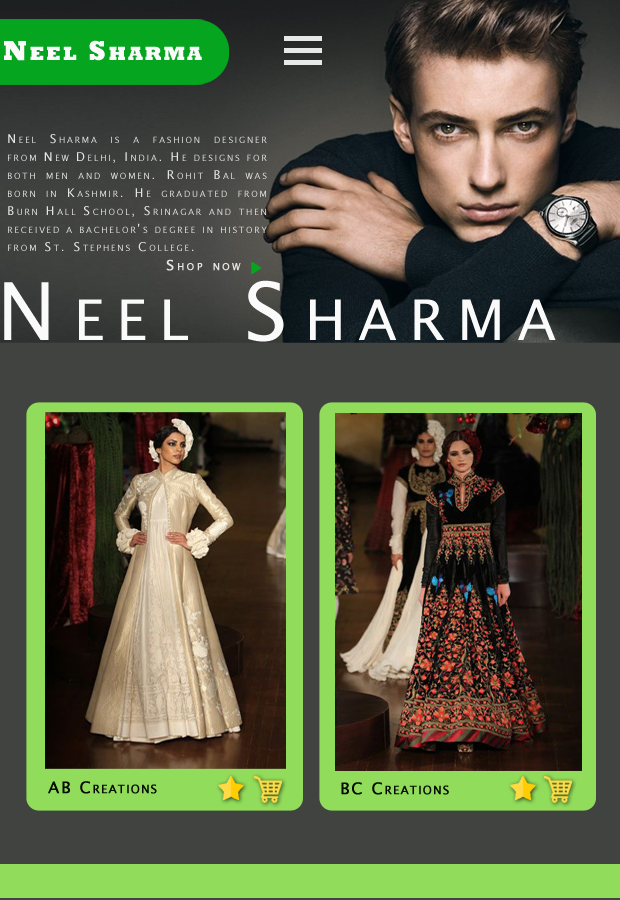
<style>
.page{position:relative;width:620px;height:900px}
.page>*{position:absolute;margin:0}
.t1{font:28px "Rockwell-ExtraBold";letter-spacing:0.1em;color:#fafafa;font-variant:small-caps}
.t2{font:12px/18px "LucidaSans";letter-spacing:0.22em;color:#e5e5e5;font-variant:small-caps}
.t3{font:14px "LucidaSans";letter-spacing:0.22em;color:#e5e5e5;font-variant:small-caps;font-weight:bold}
.t4{font:80px "LucidaSans";letter-spacing:0.22em;color:#fafafa;font-variant:small-caps}
.t5{font:16px "LucidaSans";letter-spacing:0.1em;color:#030a00;font-variant:small-caps;font-weight:bold}
</style>
<div class="page">
<p class="t1" style="left:4px;top:40px;width:198px;height:21px">Neel Sharma</p>
<p class="t2" style="left:8px;top:134px;width:259px;height:118px;text-align:justify">Neel Sharma is a fashion designer from New Delhi, India. He designs for both men and women. Rohit Bal was born in Kashmir. He graduated from Burn Hall School, Srinagar and then received a bachelor's degree in history from St. Stephens College.</p>
<p class="t3" style="left:166px;top:259px;width:75px;height:12px">Shop now</p>
<p class="t4" style="left:4px;top:280px;width:552px;height:62px">Neel Sharma</p>
<p class="t5" style="left:48px;top:781px;width:109px;height:13px">AB Creations</p>
<p class="t5" style="left:341px;top:782px;width:108px;height:13px">BC Creations</p>
</div>
